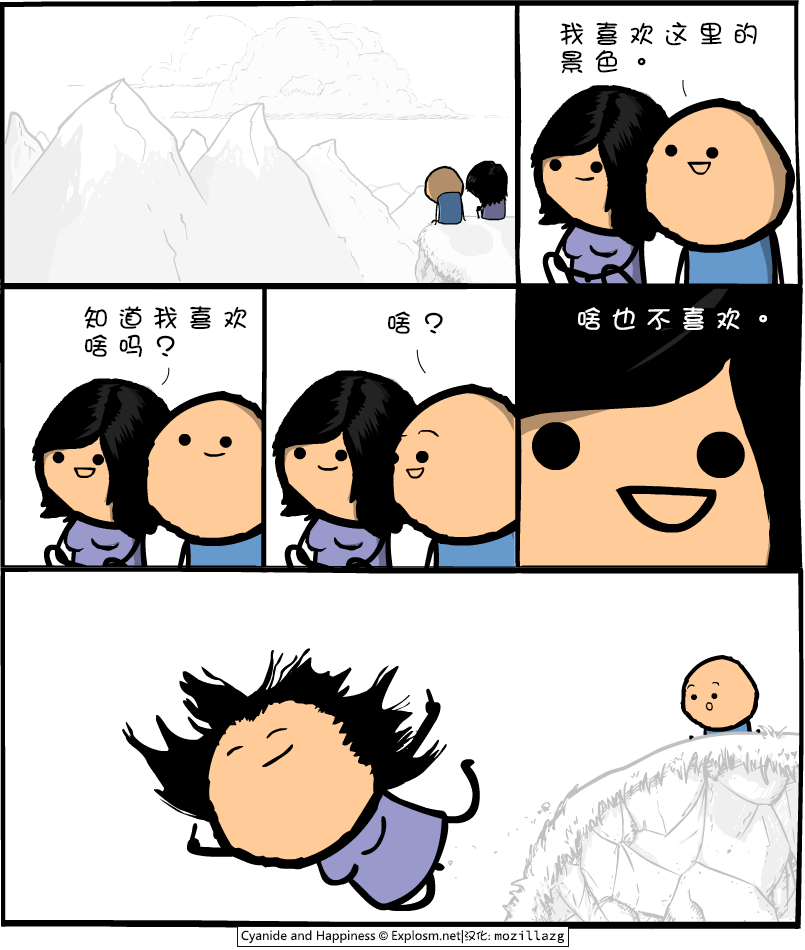
<style>
.page{position:relative;width:805px;height:950px;background:#ffffff}
.page>*{position:absolute;margin:0}
.t1{font:26px/28px "DFGirl";letter-spacing:0.34em;color:#000000}
.t2{font:26px "DFGirl";letter-spacing:0.34em;color:#000000}
.t3{font:26px "DFGirl";letter-spacing:0.34em;color:#ffffff}
</style>
<div class="page">
<p class="t1" style="left:560px;top:21px;width:197px;height:53px">我喜欢这里的<br>景色。</p>
<p class="t1" style="left:84px;top:305px;width:163px;height:53px">知道我喜欢<br>啥吗？</p>
<p class="t2" style="left:388px;top:311px;width:55px;height:23px">啥？</p>
<p class="t3" style="left:578px;top:306px;width:189px;height:24px">啥也不喜欢。</p>
</div>
